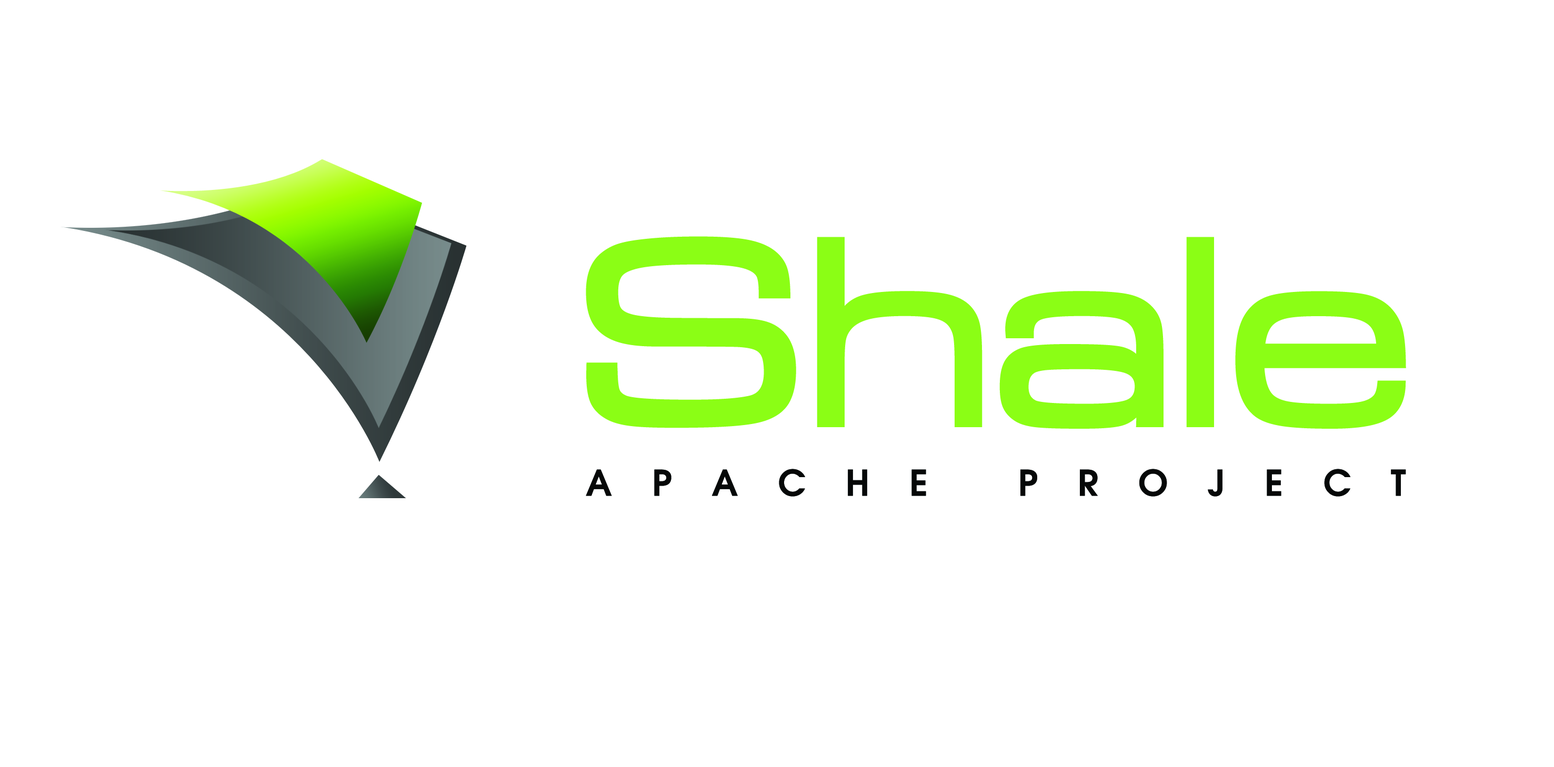
<style>
.page{position:relative;width:1554px;height:767px;background:#ffffff}
.page>*{position:absolute;margin:0}
.t1{font:274.4px "MicrogrammaD-MediExte";letter-spacing:0.004em;color:#8dfe16;font-weight:bold}
.t2{font:35.4px "AvantGarde-Demi";letter-spacing:1.13em;color:#060808}
</style>
<div class="page">
<p class="t1" style="left:586px;top:236px;width:820px;height:193px">Shale</p>
<p class="t2" style="left:586px;top:469px;width:820px;height:28px">APACHE PROJECT</p>
</div>
